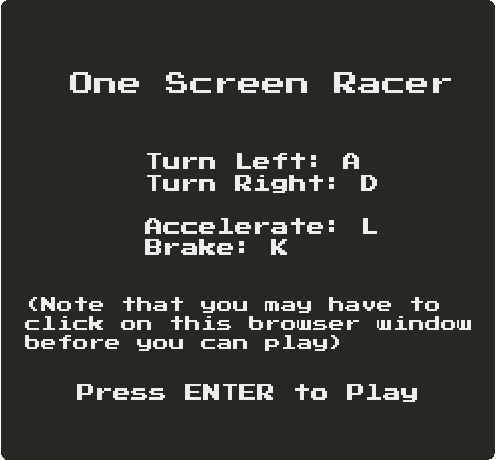
<style>
.page{position:relative;width:496px;height:460px;background:#272822}
.page>*{position:absolute;margin:0}
.t1{font:24px "PressStart2P";color:#eeeeee}
.t2{font:18px "PressStart2P";color:#eeeeee}
.t3{font:16px "PressStart2P";color:#eeeeee}
</style>
<div class="page">
<p class="t1" style="left:70px;top:72px;width:381px;height:21px">One Screen Racer</p>
<p class="t2" style="left:145px;top:153px;width:232px;height:102px">Turn Left: A<br>Turn Right: D<br><br>Accelerate: L<br>Brake: K</p>
<p class="t3" style="left:25px;top:297px;width:446px;height:54px">(Note that you may have to<br>click on this browser window<br>before you can play)</p>
<p class="t2" style="left:77px;top:384px;width:340px;height:18px">Press ENTER to Play</p>
</div>
